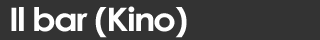
<style>
.page{position:relative;width:320px;height:40px;background:#333333}
.page>*{position:absolute;margin:0}
.t1{font:32.4px "CenturyGothic-Bold";letter-spacing:-0.05em;color:#ffffff;scale:1.11 1}
</style>
<div class="page">
<p class="t1" style="left:11px;top:6px;width:176px;height:32px">Il bar (Kino)</p>
</div>
